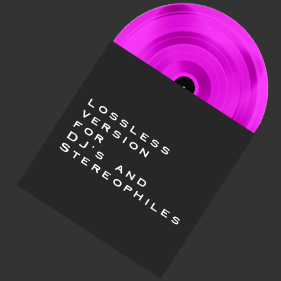
<style>
.page{position:relative;width:281px;height:281px;background:#333333}
.page>*{position:absolute;margin:0}
.t1{font:11px "Cornerstone";letter-spacing:0.32em;color:#ffffff;scale:1.18 1}
</style>
<div class="page">
<p class="t1" style="left:59px;top:98px;width:121px;height:127px;rotate:33deg">lossless<br>version<br>for<br>DJ’s and <br>Stereophiles</p>
</div>
